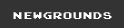
<style>
.page{position:relative;width:124px;height:28px;background:#333333}
.page>*{position:absolute;margin:0}
.t1{font:7.8px "PressStartReg";letter-spacing:0.125em;color:#ffffff;scale:1.14 1}
</style>
<div class="page">
<p class="t1" style="left:13px;top:12px;width:99px;height:7px">NEWGROUNDS</p>
</div>
